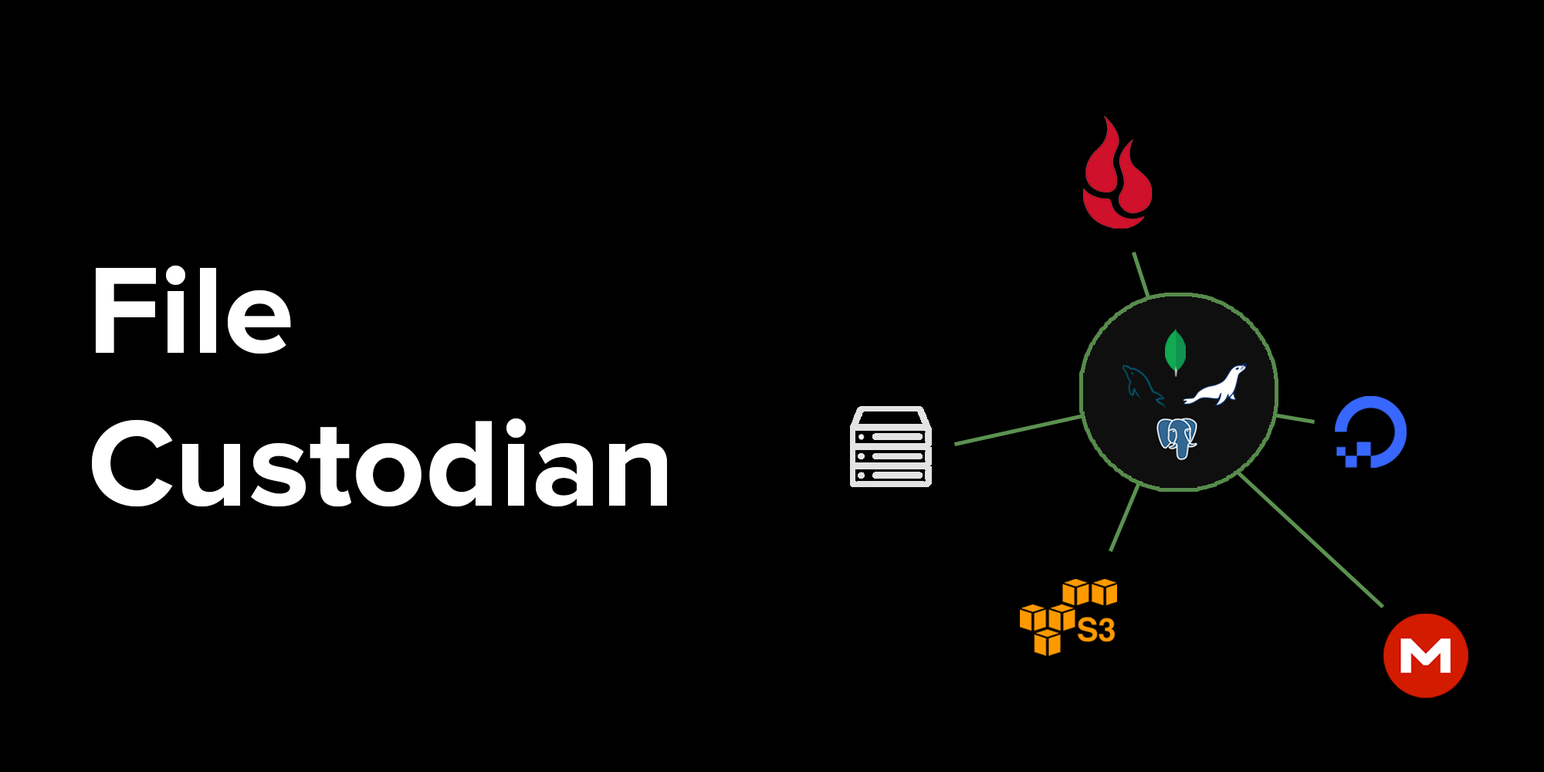
<style>
.page{position:relative;width:1544px;height:772px;background:#000000}
.page>*{position:absolute;margin:0}
.t1{font:127.4px "ProximaNova-Bold";color:#ffffff}
</style>
<div class="page">
<p class="t1" style="left:92px;top:266px;width:575px;height:241px">File <br>Custodian</p>
</div>
